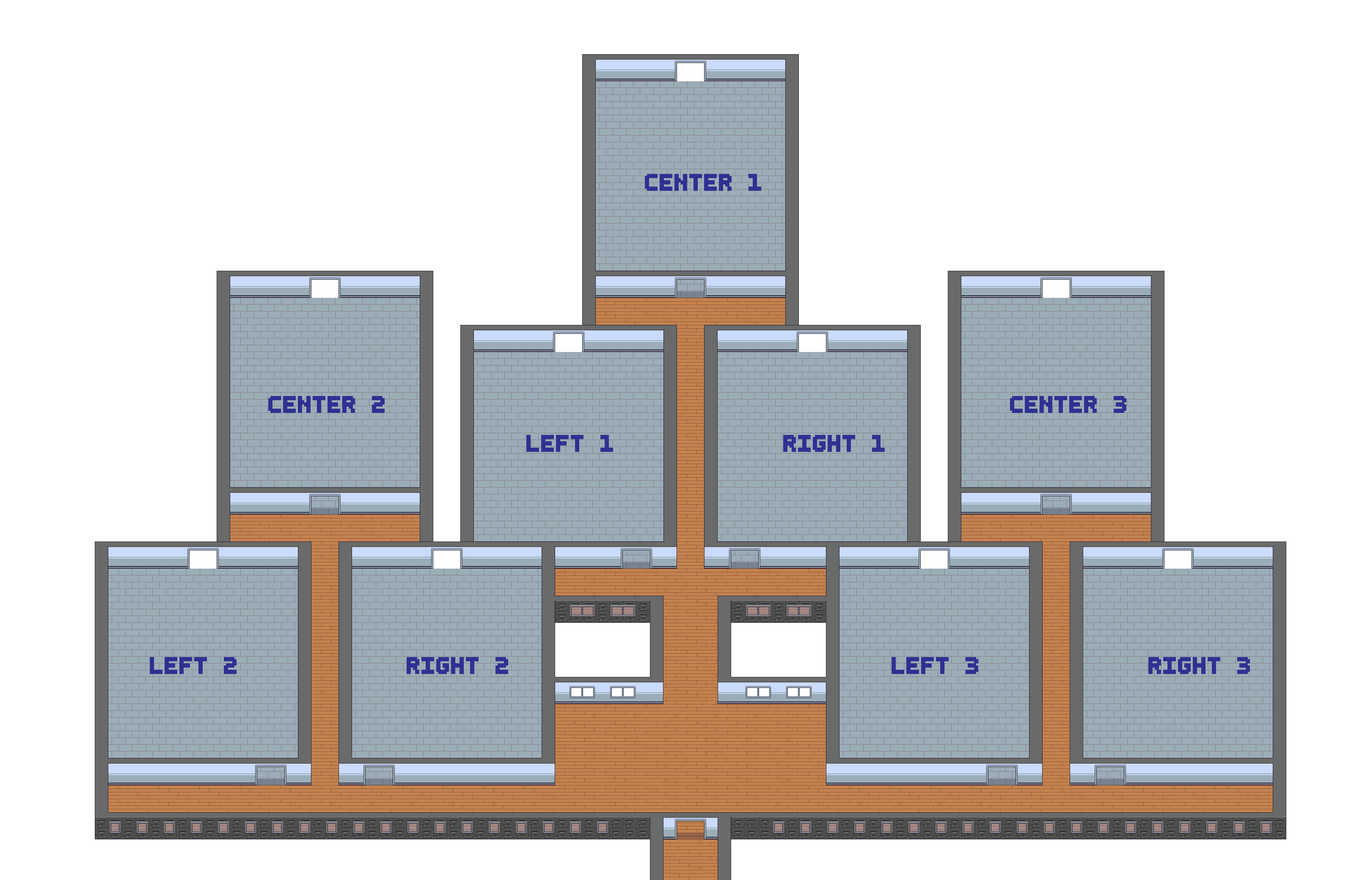
<style>
.page{position:relative;width:1354px;height:880px;background:#ffffff}
.page>*{position:absolute;margin:0}
.t1{font:42.3px "SmallBoldPixel-7";color:#2e3192}
</style>
<div class="page">
<p class="t1" style="left:645px;top:174px;width:116px;height:17px">Center 1</p>
<p class="t1" style="left:268px;top:396px;width:117px;height:17px">Center 2</p>
<p class="t1" style="left:1010px;top:396px;width:117px;height:17px">Center 3</p>
<p class="t1" style="left:527px;top:435px;width:86px;height:17px">Left 1</p>
<p class="t1" style="left:783px;top:435px;width:102px;height:17px">Right 1</p>
<p class="t1" style="left:150px;top:657px;width:87px;height:17px">Left 2</p>
<p class="t1" style="left:407px;top:657px;width:101px;height:17px">Right 2</p>
<p class="t1" style="left:892px;top:657px;width:87px;height:17px">Left 3</p>
<p class="t1" style="left:1149px;top:657px;width:101px;height:17px">Right 3</p>
</div>
